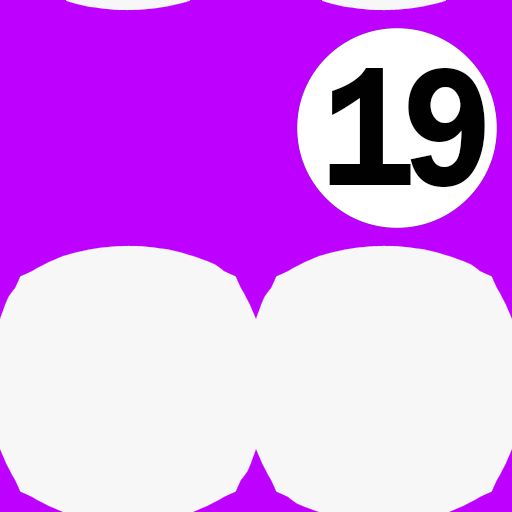
<style>
.page{position:relative;width:512px;height:512px;background:#f7f7f7}
.page>*{position:absolute;margin:0}
.t1{font:172.5px "FranklinGothic-Demi";letter-spacing:-0.05em;color:#010101;scale:0.87 1}
</style>
<div class="page">
<p class="t1" style="left:329px;top:68px;width:156px;height:119px">19</p>
</div>
